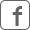
<style>
.page{position:relative;width:30px;height:30px;background:#ffffff}
.page>*{position:absolute;margin:0}
.t1{font:30px "DoHyeon-Regular";letter-spacing:0.1em;color:#626262}
</style>
<div class="page">
<p class="t1" style="left:12px;top:6px;width:10px;height:20px">f</p>
</div>
